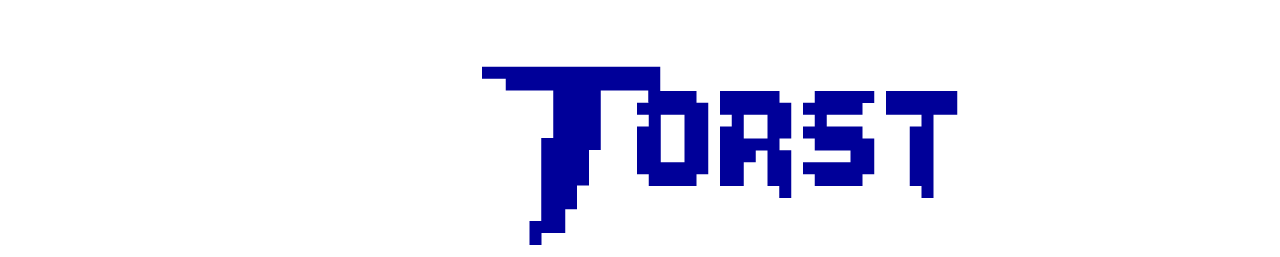
<style>
.page{position:relative;width:1280px;height:257px;background:#ffffff}
.page>*{position:absolute;margin:0}
.t1{font:190px "Lady-Radical";color:#000099}
.t2{font:190px "Lady-Radical";color:#ffffff}
.t3{font:300px "Lady-Radical";color:#ffffff}
</style>
<div class="page">
<p class="t1" style="left:19px;top:36px;width:1230px;height:221px"><span class="t2">Mega</span>Torst <span class="t3">2d</span></p>
</div>
